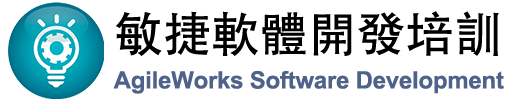
<style>
.page{position:relative;width:512px;height:102px;background:#ffffff}
.page>*{position:absolute;margin:0}
.t1{font:48px "STHeitiTC-Medium";letter-spacing:0.01em;color:#000000}
.t2{font:24px "Arial-BoldMT";letter-spacing:-0.01em;color:#4f6289}
</style>
<div class="page">
<p class="t1" style="left:116px;top:11px;width:383px;height:45px">敏捷軟體開發培訓</p>
<p class="t2" style="left:113px;top:70px;width:391px;height:24px">AgileWorks Software Development</p>
</div>
